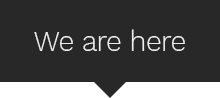
<style>
.page{position:relative;width:220px;height:98px;background:#282828}
.page>*{position:absolute;margin:0}
.t1{font:28.3px "WorkSans-Light";letter-spacing:-0.02em;color:#ededed}
</style>
<div class="page">
<p class="t1" style="left:34px;top:29px;width:151px;height:22px">We are here</p>
</div>
